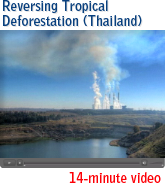
<style>
.page{position:relative;width:165px;height:188px}
.page>*{position:absolute;margin:0}
.t1{font:13.5px/15px "BellGothicStd-Bold";color:#09407e}
.t2{font:13.5px "BellGothicStd-Bold";color:#fd0107}
</style>
<div class="page">
<p class="t1" style="left:3px;top:0px;width:139px;height:26px">Reversing Tropical<br>Deforestation (Thailand)</p>
<p class="t2" style="left:69px;top:172px;width:92px;height:11px">14-minute video</p>
</div>
